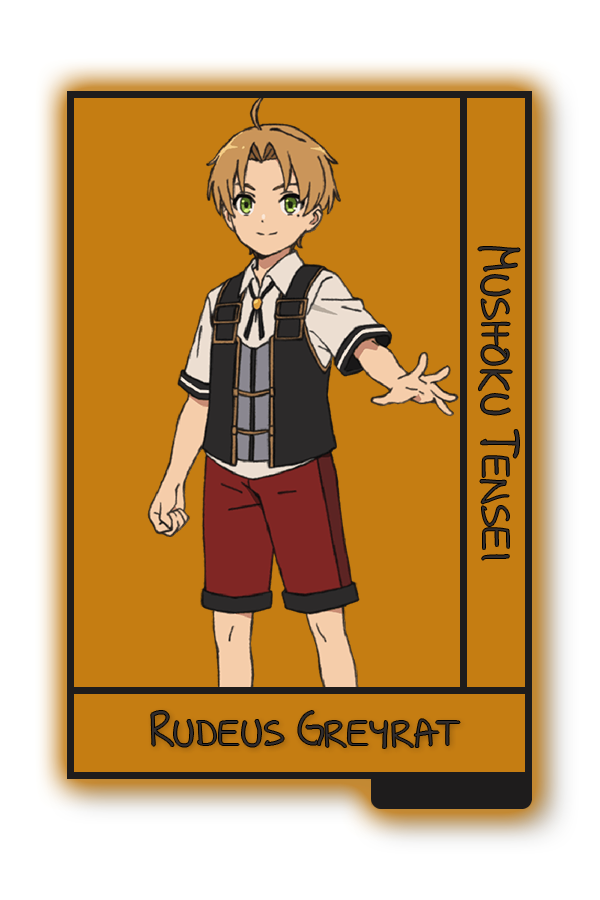
<style>
.page{position:relative;width:600px;height:900px;background:#c57d12}
.page>*{position:absolute;margin:0}
.t1{font:41px "AllCaps";color:#312d2d}
.t2{font:38.3px "AllCaps";color:#312d2d}
</style>
<div class="page">
<p class="t1" style="left:478px;top:247px;width:42px;height:313px;rotate:90deg">Mushoku Tensei</p>
<p class="t2" style="left:151px;top:711px;width:309px;height:37px">Rudeus Greyrat</p>
</div>
